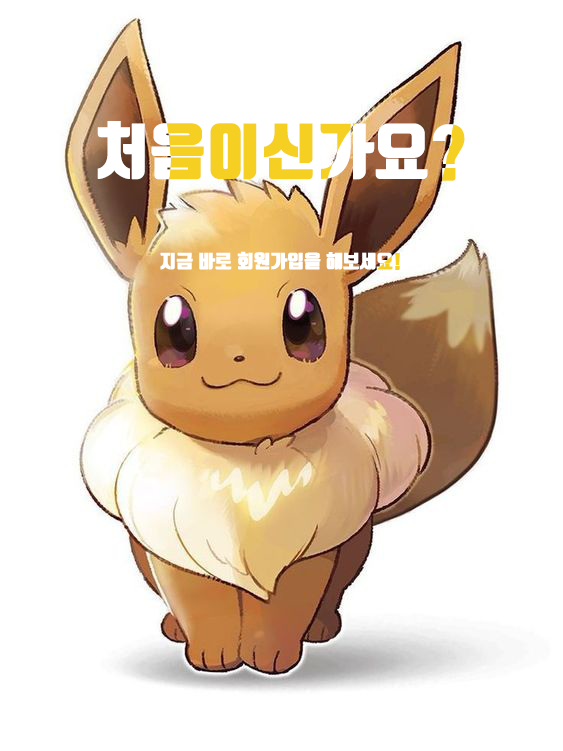
<style>
.page{position:relative;width:563px;height:751px;background:#ffffff}
.page>*{position:absolute;margin:0}
.t1{font:60px "TmonMonsoriBlack";font-weight:bold}
.t2{font:18px "TmonMonsoriBlack";color:#ffffff;font-weight:bold}
</style>
<div class="page">
<p class="t1" style="left:97px;top:121px;width:368px;height:60px">처음이신가요?</p>
<p class="t2" style="left:160px;top:251px;width:240px;height:19px">지금 바로 회원가입을 해보세요!</p>
</div>
